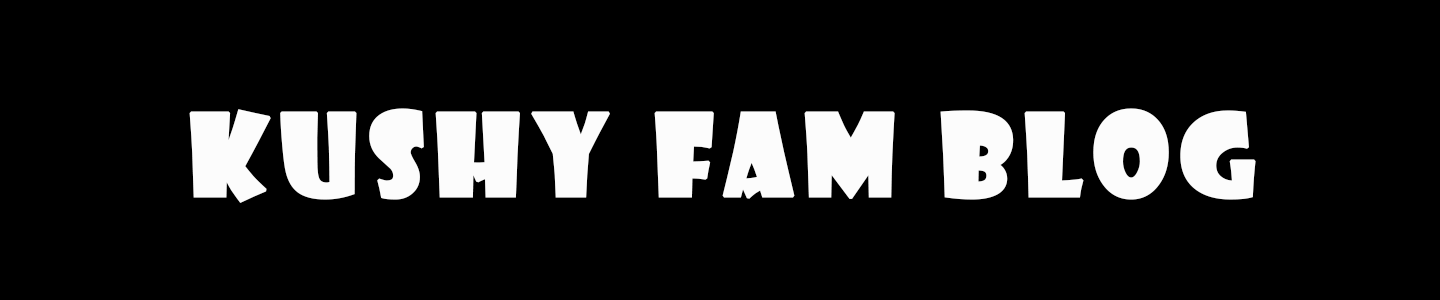
<style>
.page{position:relative;width:1440px;height:300px;background:#000000}
.page>*{position:absolute;margin:0}
.t1{font:110px "ShowcardGothic-Reg";letter-spacing:0.075em;color:#fcfcfc;font-weight:bold}
</style>
<div class="page">
<p class="t1" style="left:189px;top:108px;width:1067px;height:95px">Kushy Fam Blog</p>
</div>
